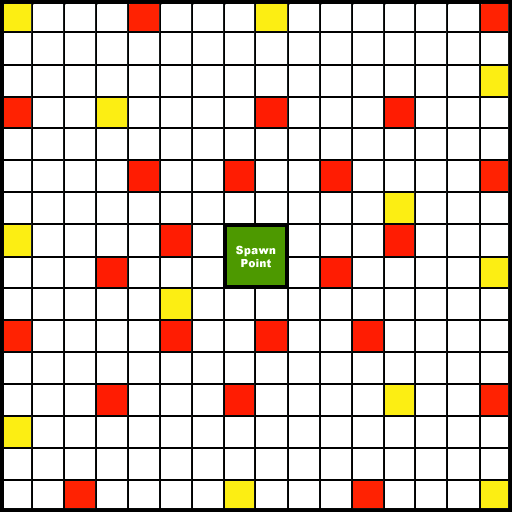
<style>
.page{position:relative;width:512px;height:512px;background:#ffffff}
.page>*{position:absolute;margin:0}
.t1{font:11px "Arial-Black";color:#ffffff}
</style>
<div class="page">
<p class="t1" style="left:236px;top:245px;width:40px;height:23px;text-align:center">Spawn Point</p>
</div>
